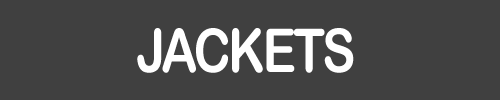
<style>
.page{position:relative;width:500px;height:100px;background:#404040}
.page>*{position:absolute;margin:0}
.t1{font:60.5px "ArialRoundedMTBold";letter-spacing:-0.055em;color:#ffffff;scale:0.83 1}
</style>
<div class="page">
<p class="t1" style="left:137px;top:28px;width:217px;height:45px">JACKETS</p>
</div>
